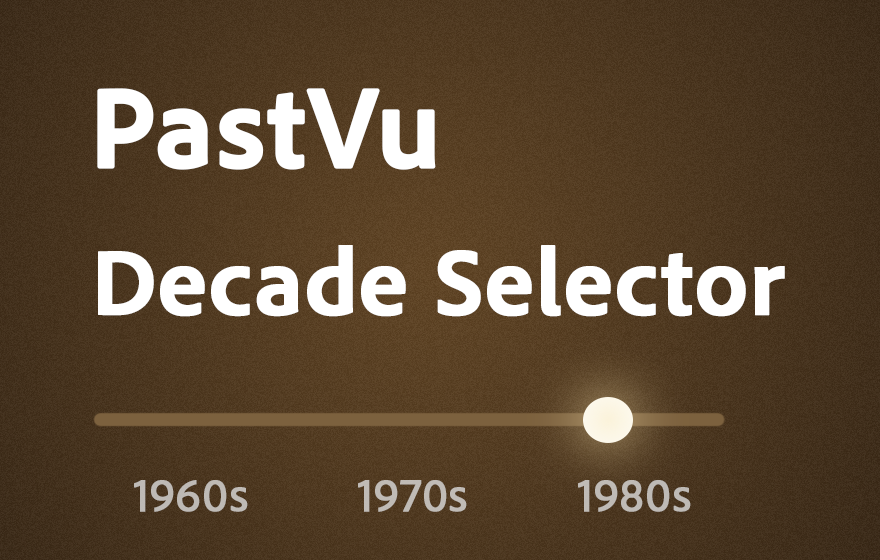
<style>
.page{position:relative;width:880px;height:560px}
.page>*{position:absolute;margin:0}
.t1{font:116px "AdobeClean-Bold";color:#ffffff;font-weight:bold}
.t2{font:96px "AdobeClean-Bold";color:#ffffff;font-weight:bold}
.t3{font:48px "AdobeClean-Regular";color:#bebab5;font-weight:bold}
.t4{font:48px "AdobeClean-Regular";color:#c0bbb5;font-weight:bold}
.t5{font:48px "AdobeClean-Regular";color:#bfbab5;font-weight:bold}
</style>
<div class="page">
<p class="t1" style="left:97px;top:88px;width:339px;height:82px">PastVu</p>
<p class="t2" style="left:98px;top:245px;width:687px;height:72px">Decade Selector</p>
<p class="t3" style="left:134px;top:480px;width:114px;height:32px">1960s</p>
<p class="t4" style="left:358px;top:480px;width:109px;height:32px">1970s</p>
<p class="t5" style="left:578px;top:480px;width:113px;height:32px">1980s</p>
</div>
